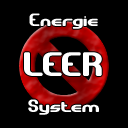
<style>
.page{position:relative;width:128px;height:128px;background:#000000}
.page>*{position:absolute;margin:0}
.t1{font:18px "GravitateBRK";color:#ffffff}
.t2{font:34px "GravitateBRK";color:#ffffff}
</style>
<div class="page">
<p class="t1" style="left:29px;top:13px;width:69px;height:16px">Energie</p>
<p class="t2" style="left:24px;top:52px;width:78px;height:24px">LEER</p>
<p class="t1" style="left:28px;top:99px;width:71px;height:16px">System</p>
</div>
